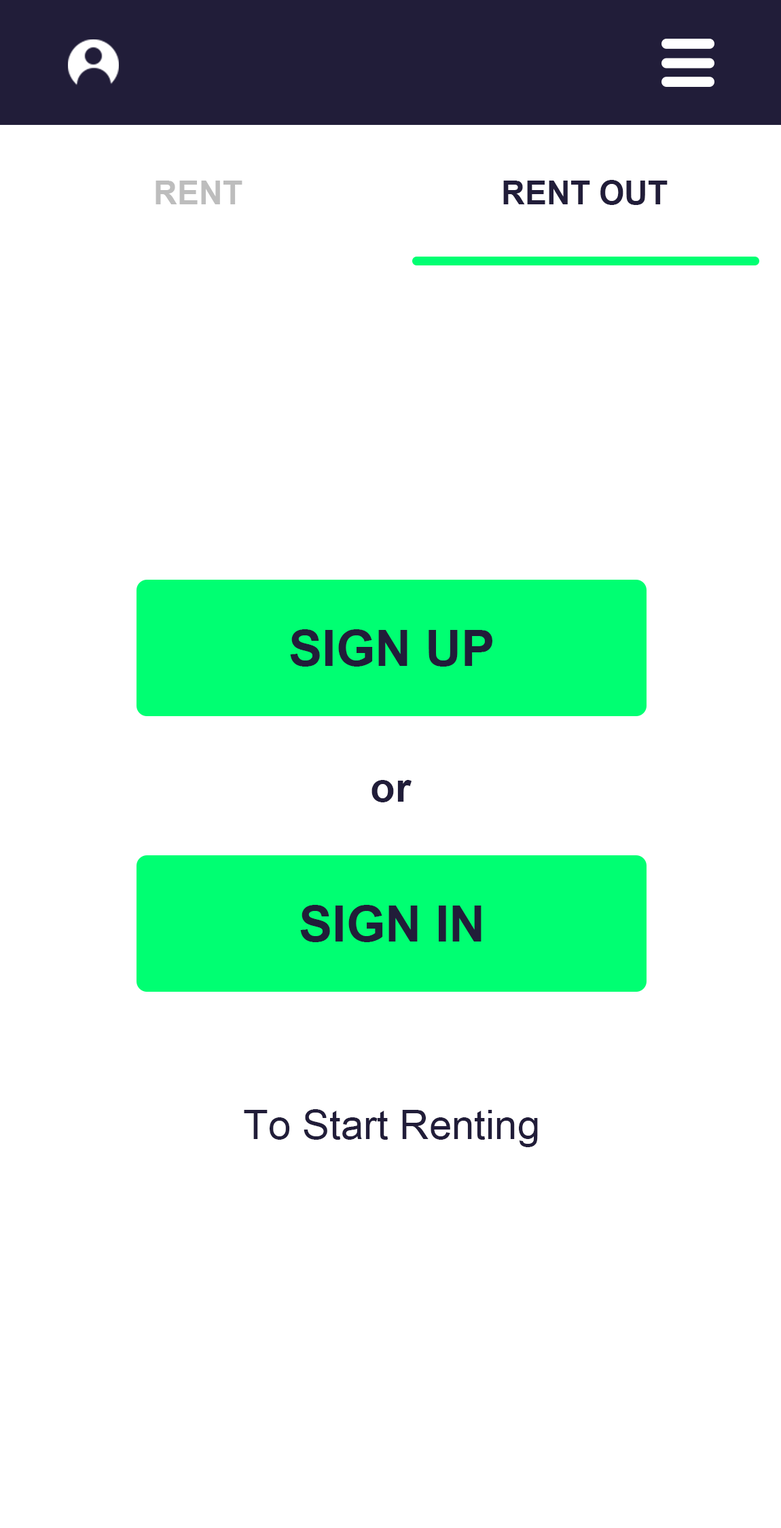
<style>
.page{position:relative;width:781px;height:1528px;background:#ffffff}
.page>*{position:absolute;margin:0}
.t1{font:32.6px "Arial-BoldMT";color:#bdbdbd;text-transform:uppercase}
.t2{font:32.6px "Arial-BoldMT";color:#211d39;text-transform:uppercase}
.t3{font:50px "Arial-BoldMT";color:#211d39}
.t4{font:40.7px "Arial-BoldMT";color:#211d39}
.t5{font:40.7px "ArialMT";color:#211d39}
</style>
<div class="page">
<p class="t1" style="left:155px;top:181px;width:87px;height:23px">Rent</p>
<p class="t2" style="left:503px;top:180px;width:164px;height:25px">Rent Out</p>
<p class="t3" style="left:290px;top:629px;width:202px;height:37px">SIGN UP</p>
<p class="t4" style="left:371px;top:780px;width:40px;height:22px">or</p>
<p class="t3" style="left:300px;top:905px;width:181px;height:37px">SIGN IN</p>
<p class="t5" style="left:244px;top:1109px;width:294px;height:38px">To Start Renting</p>
</div>
